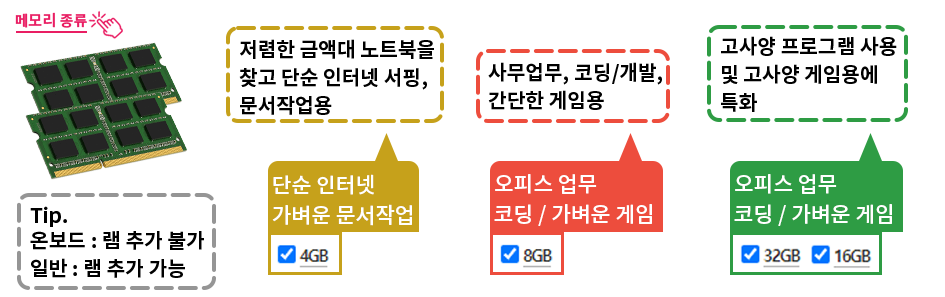
<style>
.page{position:relative;width:945px;height:297px;background:#ffffff}
.page>*{position:absolute;margin:0}
.t1{font:15.1px "NotoSansKR-Bold";color:#e91e63}
.t2{font:20.3px/28.3px "NotoSansKR-Bold";color:#000000}
.t3{font:21.4px/29.8px "NotoSansKR-Medium";color:#ffffff}
.t4{font:20.3px "NotoSansKR-Bold";color:#000000}
</style>
<div class="page">
<p class="t1" style="left:15px;top:12px;width:72px;height:16px">메모리 종류</p>
<p class="t2" style="left:239px;top:39px;width:195px;height:76px">저렴한 금액대 노트북을<br>찾고 단순 인터넷 서핑,<br>문서작업용</p>
<p class="t2" style="left:721px;top:36px;width:176px;height:76px">고사양 프로그램 사용<br>및 고사양 게임용에<br>특화</p>
<p class="t2" style="left:488px;top:62px;width:174px;height:48px">사무업무, 코딩/개발,<br>간단한 게임용</p>
<p class="t3" style="left:272px;top:174px;width:140px;height:52px">단순 인터넷<br>가벼운 문서작업</p>
<p class="t3" style="left:494px;top:174px;width:158px;height:52px">오피스 업무<br>코딩 / 가벼운 게임</p>
<p class="t3" style="left:734px;top:174px;width:158px;height:52px">오피스 업무<br>코딩 / 가벼운 게임</p>
<p class="t4" style="left:30px;top:206px;width:37px;height:21px">Tip.</p>
<p class="t4" style="left:30px;top:231px;width:174px;height:19px">온보드 : 램 추가 불가</p>
<p class="t4" style="left:31px;top:258px;width:154px;height:20px">일반 : 램 추가 가능</p>
</div>
